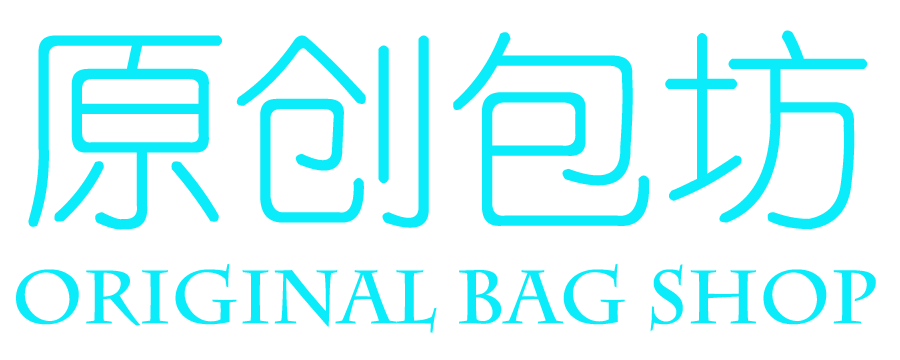
<style>
.page{position:relative;width:900px;height:360px;background:#ffffff}
.page>*{position:absolute;margin:0}
.t1{font:213.4px "YouYuan";color:#0aecfa}
.t2{font:74.7px "CharlemagneStd-Bold";color:#0aecfa}
</style>
<div class="page">
<p class="t1" style="left:28px;top:30px;width:840px;height:200px">原创包坊</p>
<p class="t2" style="left:16px;top:264px;width:860px;height:69px">Original bag shop</p>
</div>
